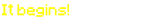
<style>
.page{position:relative;width:168px;height:20px;background:#ffffff}
.page>*{position:absolute;margin:0}
.t1{font:12.5px "Minecraftia-Regular";color:#fffb00}
</style>
<div class="page">
<p class="t1" style="left:1px;top:4px;width:69px;height:13px">It begins!</p>
</div>
